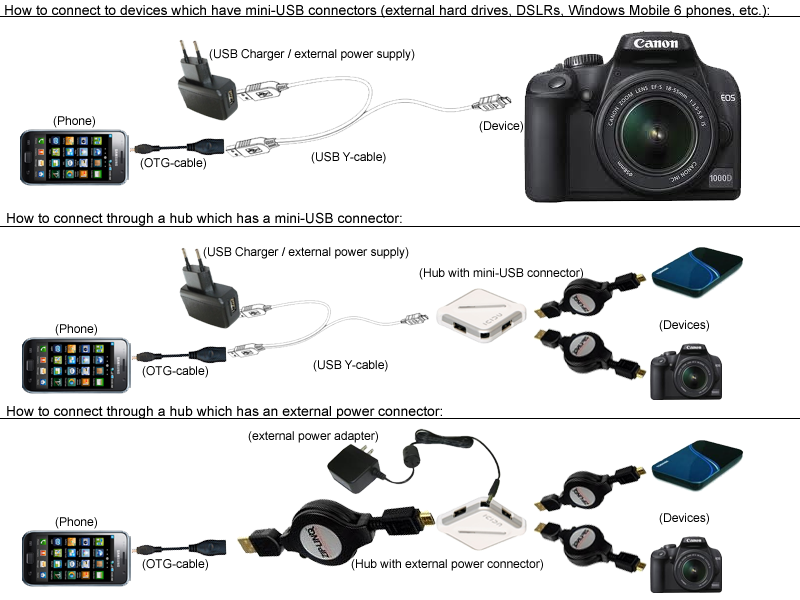
<style>
.page{position:relative;width:800px;height:600px;background:#ffffff}
.page>*{position:absolute;margin:0}
.t1{font:14px "ArialMT";color:#000000}
.t2{font:12px "ArialMT";color:#000000}
</style>
<div class="page">
<p class="t1" style="left:5px;top:4px;width:764px;height:14px">How to connect to devices which have mini-USB connectors (external hard drives, DSLRs, Windows Mobile 6 phones, etc.):</p>
<p class="t2" style="left:209px;top:49px;width:206px;height:12px">(USB Charger / external power supply)</p>
<p class="t2" style="left:53px;top:116px;width:42px;height:12px">(Phone)</p>
<p class="t2" style="left:479px;top:121px;width:44px;height:12px">(Device)</p>
<p class="t2" style="left:140px;top:158px;width:66px;height:12px">(OTG-cable)</p>
<p class="t2" style="left:311px;top:152px;width:75px;height:12px">(USB Y-cable)</p>
<p class="t1" style="left:7px;top:212px;width:395px;height:14px">How to connect through a hub which has a mini-USB connector:</p>
<p class="t2" style="left:203px;top:247px;width:206px;height:12px">(USB Charger / external power supply)</p>
<p class="t2" style="left:419px;top:268px;width:164px;height:12px">(Hub with mini-USB connector)</p>
<p class="t2" style="left:55px;top:324px;width:42px;height:12px">(Phone)</p>
<p class="t2" style="left:659px;top:320px;width:50px;height:12px">(Devices)</p>
<p class="t2" style="left:142px;top:366px;width:66px;height:12px">(OTG-cable)</p>
<p class="t2" style="left:313px;top:360px;width:75px;height:12px">(USB Y-cable)</p>
<p class="t1" style="left:7px;top:406px;width:435px;height:13px">How to connect through a hub which has an external power connector:</p>
<p class="t2" style="left:248px;top:431px;width:130px;height:12px">(external power adapter)</p>
<p class="t2" style="left:55px;top:517px;width:42px;height:12px">(Phone)</p>
<p class="t2" style="left:659px;top:513px;width:50px;height:12px">(Devices)</p>
<p class="t2" style="left:142px;top:559px;width:66px;height:12px">(OTG-cable)</p>
<p class="t2" style="left:351px;top:559px;width:192px;height:12px">(Hub with external power connector)</p>
</div>
